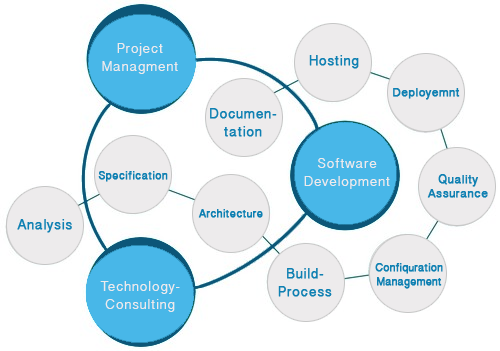
<style>
.page{position:relative;width:500px;height:351px;background:#ffffff}
.page>*{position:absolute;margin:0}
.t1{font:14px/18px "MalayalamSangamMN";letter-spacing:0.05em;color:#edebec}
.t2{font:14px "MalayalamSangamMN";letter-spacing:0.025em;color:#0f80b2;font-weight:bold}
.t3{font:12px "MalayalamSangamMN";letter-spacing:0.025em;color:#0f80b2;font-weight:bold}
.t4{font:14px/18px "MalayalamSangamMN";letter-spacing:0.025em;color:#0f80b2;font-weight:bold}
.t5{font:11px "MalayalamSangamMN";letter-spacing:0.025em;color:#0f80b2;font-weight:bold}
.t6{font:12px/14px "MalayalamSangamMN";letter-spacing:0.025em;color:#0f80b2;font-weight:bold}
.t7{font:11px/14px "MalayalamSangamMN";color:#0f80b2;font-weight:bold}
</style>
<div class="page">
<p class="t1" style="left:102px;top:43px;width:76px;height:31px;text-align:center">Project<br>Managment</p>
<p class="t2" style="left:309px;top:55px;width:50px;height:14px">Hosting</p>
<p class="t3" style="left:393px;top:88px;width:67px;height:12px">Deployemnt</p>
<p class="t4" style="left:210px;top:108px;width:67px;height:29px;text-align:center">Documen-<br>tation</p>
<p class="t1" style="left:304px;top:158px;width:86px;height:31px;text-align:center">Software<br>Development</p>
<p class="t5" style="left:98px;top:171px;width:70px;height:11px">Specification</p>
<p class="t6" style="left:427px;top:174px;width:61px;height:24px;text-align:center">Quality<br>Assurance</p>
<p class="t5" style="left:198px;top:209px;width:65px;height:9px">Architecture</p>
<p class="t2" style="left:17px;top:219px;width:55px;height:14px">Analysis</p>
<p class="t4" style="left:278px;top:268px;width:54px;height:29px;text-align:center">Build-<br>Process</p>
<p class="t7" style="left:375px;top:263px;width:68px;height:26px;text-align:center">Confiquration<br>Management</p>
<p class="t1" style="left:100px;top:281px;width:80px;height:31px;text-align:center">Technology-<br>Consulting</p>
</div>
